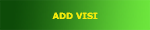
<style>
.page{position:relative;width:150px;height:30px}
.page>*{position:absolute;margin:0}
.t1{font:8.6px "Verdana-Bold";color:#f1e90c}
</style>
<div class="page">
<p class="t1" style="left:52px;top:12px;width:46px;height:7px">ADD VISI</p>
</div>
